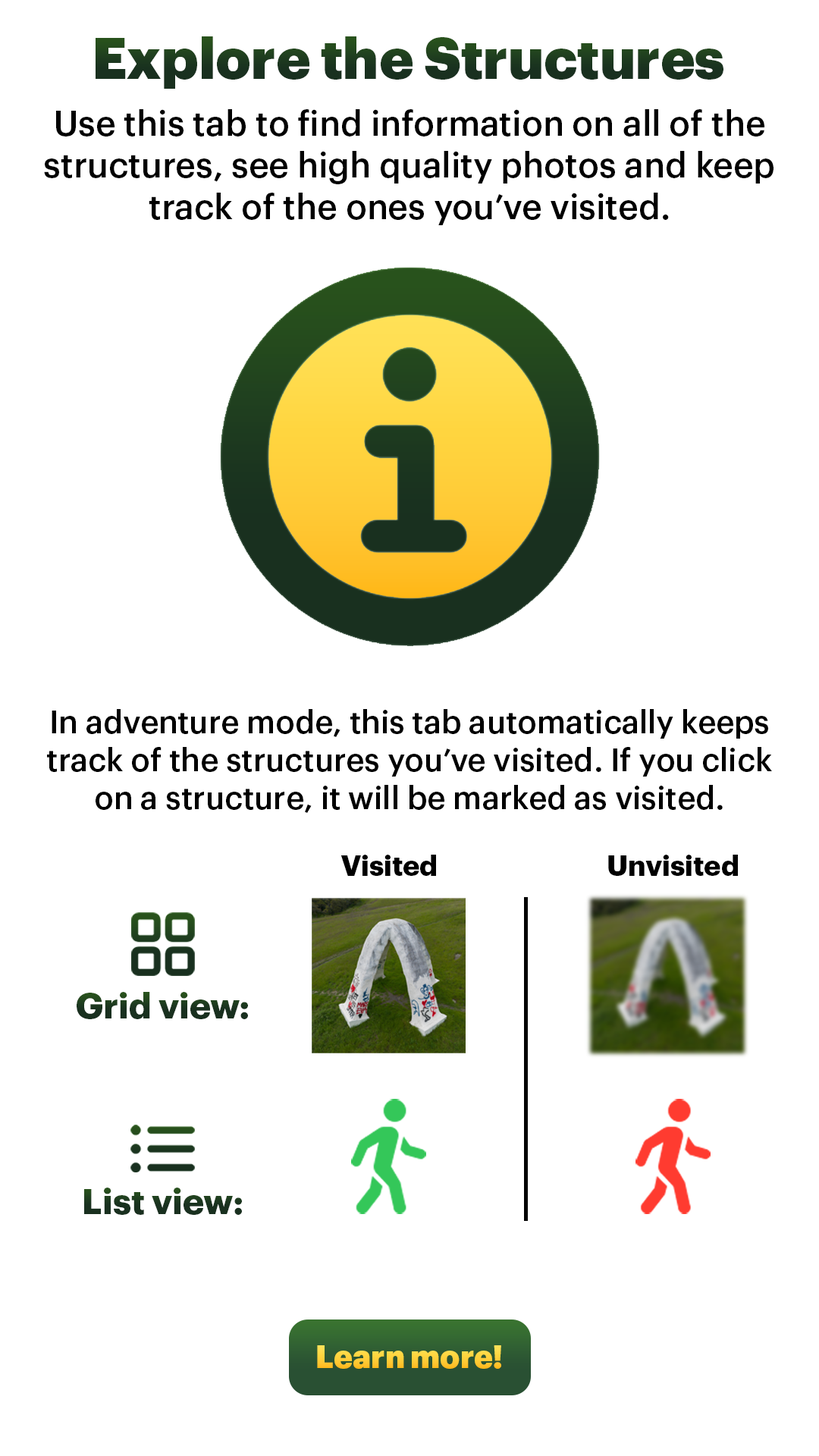
<style>
.page{position:relative;width:819px;height:1456px;background:#ffffff}
.page>*{position:absolute;margin:0}
.t1{font:56.9px "Graphik-Black";color:#1c371f}
.t2{font:34.8px "Graphik-Medium";color:#000000}
.t3{font:31.6px "Graphik-Medium";color:#000000}
.t4{font:28.1px "Graphik-Bold";color:#000000}
.t5{font:35.2px "Graphik-Bold";color:#1a321f}
.t6{font:31.6px "Graphik-Black";color:#ffce3a}
</style>
<div class="page">
<p class="t1" style="left:96px;top:36px;width:627px;height:53px">Explore the Structures</p>
<p class="t2" style="left:44px;top:109px;width:729px;height:116px;text-align:center">Use this tab to find information on all of the structures, see high quality photos and keep track of the ones you’ve visited.</p>
<p class="t3" style="left:47px;top:709px;width:725px;height:104px;text-align:center">In adventure mode, this tab automatically keeps track of the structures you’ve visited. If you click on a structure, it will be marked as visited.</p>
<p class="t4" style="left:340px;top:855px;width:96px;height:21px">Visited</p>
<p class="t4" style="left:608px;top:855px;width:130px;height:21px">Unvisited</p>
<p class="t5" style="left:77px;top:992px;width:171px;height:27px">Grid view:</p>
<p class="t5" style="left:84px;top:1188px;width:158px;height:27px">List view:</p>
<p class="t6" style="left:317px;top:1345px;width:184px;height:24px">Learn more!</p>
</div>
